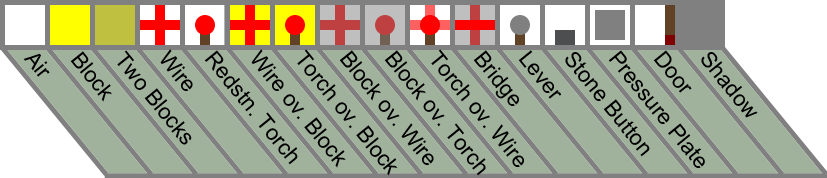
<style>
.page{position:relative;width:827px;height:178px;background:#a0b19c}
.page>*{position:absolute;margin:0}
.t1{font:21.9px "ArialMT";color:#000000}
</style>
<div class="page">
<p class="t1" style="left:23px;top:53px;width:27px;height:24px;rotate:51deg">Air</p>
<p class="t1" style="left:70px;top:51px;width:42px;height:51px;rotate:51deg">Block</p>
<p class="t1" style="left:117px;top:50px;width:75px;height:95px;rotate:51deg">Two Blocks</p>
<p class="t1" style="left:160px;top:49px;width:33px;height:42px;rotate:51deg">Wire</p>
<p class="t1" style="left:204px;top:50px;width:94px;height:115px;rotate:51deg">Redstn. Torch</p>
<p class="t1" style="left:251px;top:49px;width:95px;height:119px;rotate:51deg">Wire ov. Block</p>
<p class="t1" style="left:297px;top:49px;width:101px;height:127px;rotate:51deg">Torch ov. Block</p>
<p class="t1" style="left:339px;top:50px;width:95px;height:115px;rotate:51deg">Block ov. Wire</p>
<p class="t1" style="left:384px;top:50px;width:102px;height:126px;rotate:51deg">Block ov. Torch</p>
<p class="t1" style="left:431px;top:49px;width:93px;height:118px;rotate:51deg">Torch ov. Wire</p>
<p class="t1" style="left:473px;top:50px;width:46px;height:56px;rotate:51deg">Bridge</p>
<p class="t1" style="left:518px;top:50px;width:43px;height:49px;rotate:51deg">Lever</p>
<p class="t1" style="left:565px;top:52px;width:85px;height:105px;rotate:51deg">Stone Button</p>
<p class="t1" style="left:608px;top:50px;width:97px;height:118px;rotate:51deg">Pressure Plate</p>
<p class="t1" style="left:653px;top:50px;width:39px;height:43px;rotate:51deg">Door</p>
<p class="t1" style="left:701px;top:52px;width:57px;height:66px;rotate:51deg">Shadow</p>
</div>
